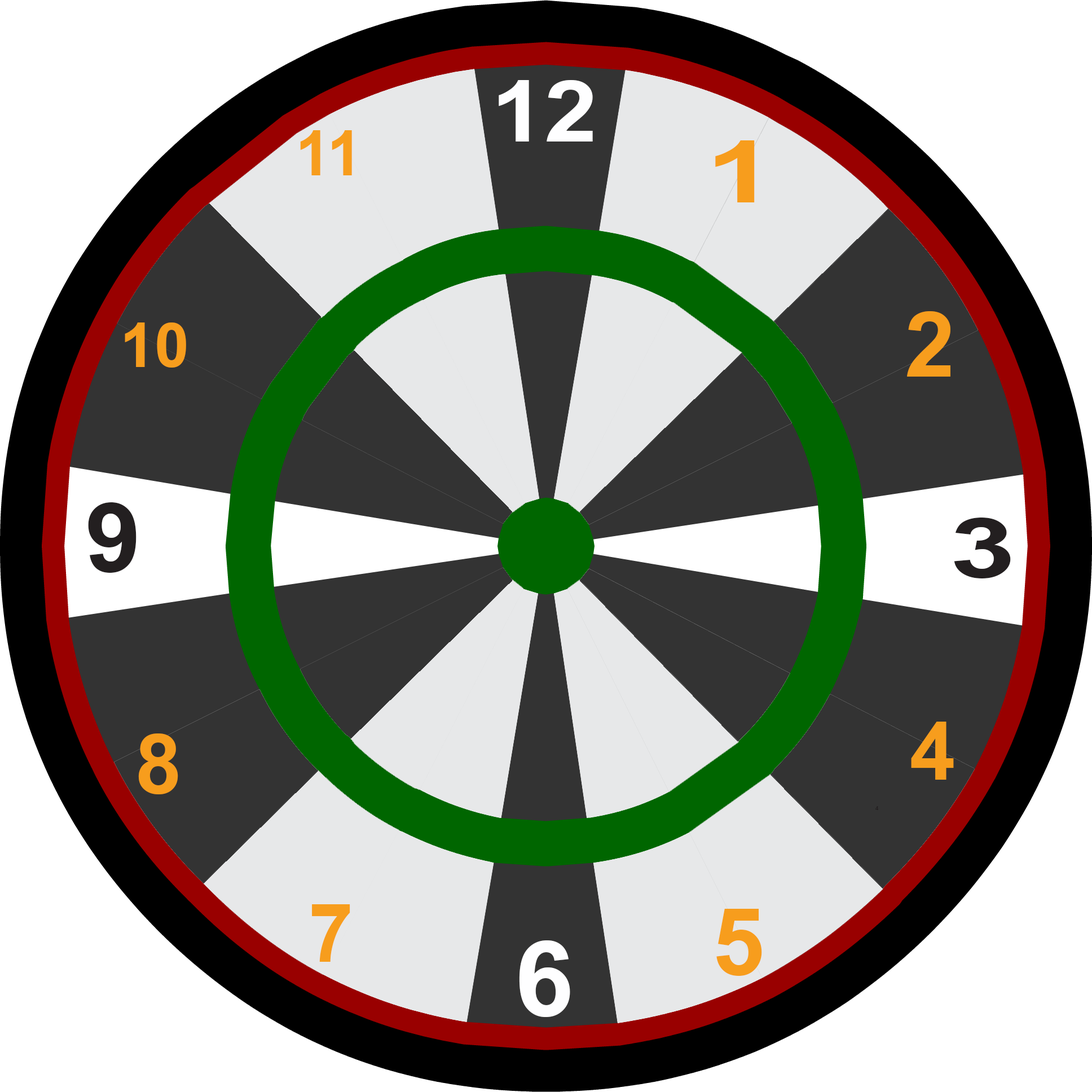
<style>
.page{position:relative;width:1092px;height:1092px;background:#ffffff}
.page>*{position:absolute;margin:0}
.t1{font:52px "Arial-BoldMT";color:#fefeff;scale:1.11 1}
.t2{font:62.7px "Arial-BoldMT";color:#f79d1d}
.t3{font:85.7px "Arial-BoldMT";color:#f79d1d;scale:1.44 1}
.t4{font:90.1px "Arial-BoldMT";color:#f79d1d}
.t5{font:62px "Arial-BoldMT";color:#f79d1d}
.t6{font:96.7px "Arial-BoldMT";color:#231f20;scale:1.03 1}
.t7{font:82.8px "Arial-BoldMT";color:#231f20;scale:1.42 1}
.t8{font:81.7px "Arial-BoldMT";color:#f79d1d}
.t9{font:82.8px "Arial-BoldMT";color:#f79d1d}
.t10{font:5.6px "Arial-BoldMT";color:#231f20}
.t11{font:80.5px "Arial-BoldMT";color:#f79d1d}
.t12{font:93.4px "Arial-BoldMT";color:#f79d1d}
.t13{font:105.2px "Arial-BoldMT";color:#fefeff}
</style>
<div class="page">
<p class="t1" style="left:498px;top:80px;width:95px;height:62px">12</p>
<p class="t2" style="left:300px;top:130px;width:52px;height:45px">11</p>
<p class="t3" style="left:715px;top:140px;width:39px;height:62px">1</p>
<p class="t4" style="left:907px;top:311px;width:43px;height:66px">2</p>
<p class="t5" style="left:125px;top:323px;width:61px;height:45px">10</p>
<p class="t6" style="left:88px;top:502px;width:48px;height:71px">9</p>
<p class="t7" style="left:954px;top:518px;width:57px;height:61px">3</p>
<p class="t8" style="left:911px;top:722px;width:43px;height:58px">4</p>
<p class="t9" style="left:138px;top:734px;width:40px;height:61px">8</p>
<p class="t10" style="left:875px;top:806px;width:4px;height:4px">4</p>
<p class="t11" style="left:312px;top:904px;width:38px;height:58px">7</p>
<p class="t12" style="left:716px;top:909px;width:46px;height:67px">5</p>
<p class="t13" style="left:519px;top:941px;width:51px;height:76px">6</p>
</div>
